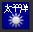
<style>
.page{position:relative;width:33px;height:32px;background:#000090}
.page>*{position:absolute;margin:0}
.t1{font:10.4px "SimSun";letter-spacing:-0.25em;color:#ffffff}
</style>
<div class="page">
<p class="t1" style="left:4px;top:4px;width:24px;height:9px">太平洋</p>
</div>
